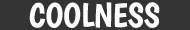
<style>
.page{position:relative;width:190px;height:30px;background:#333333}
.page>*{position:absolute;margin:0}
.t1{font:34px "Boogaloo-Regular";color:#ffffff}
</style>
<div class="page">
<p class="t1" style="left:29px;top:2px;width:131px;height:26px">COOLNESS</p>
</div>
